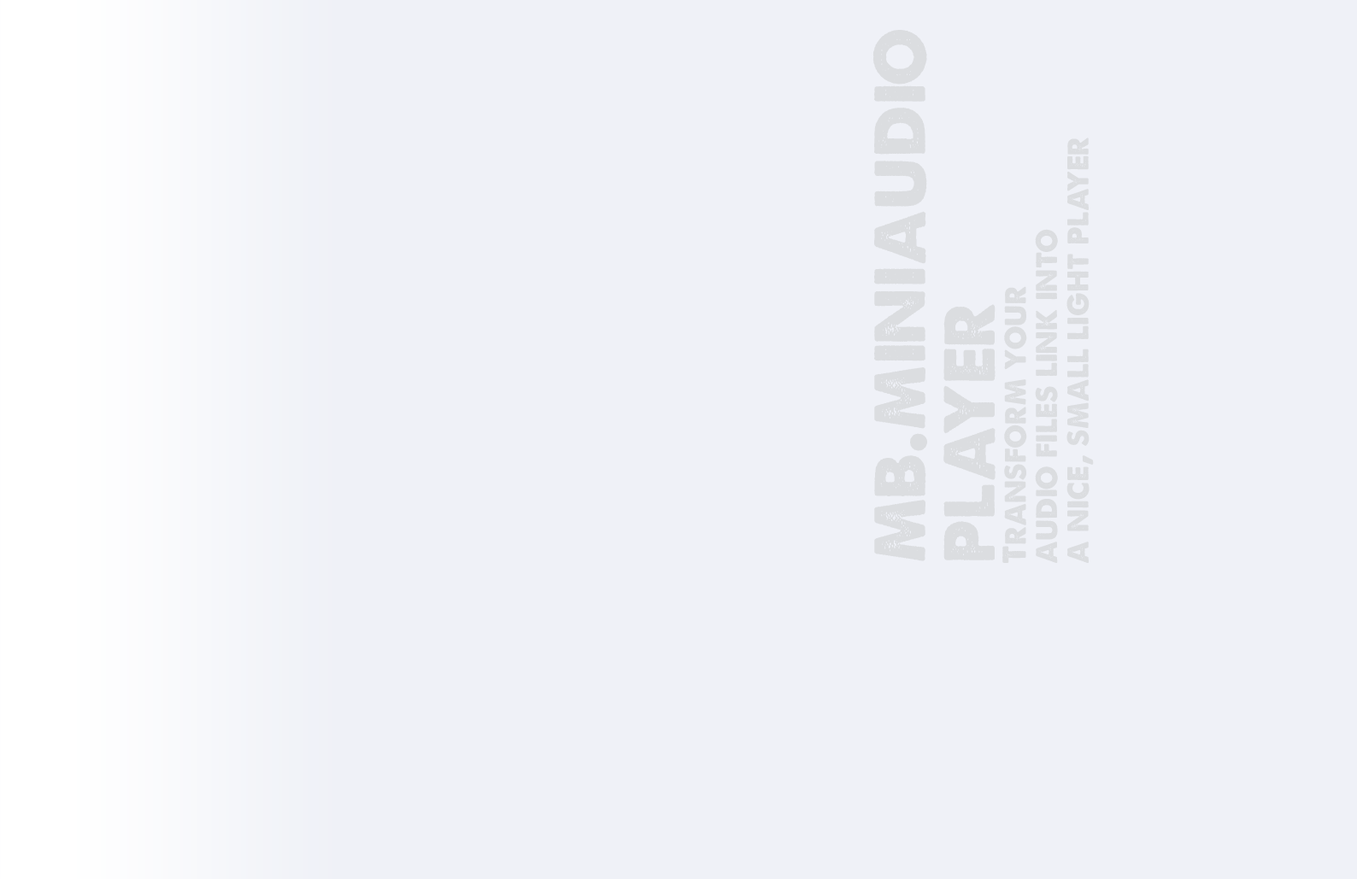
<style>
.page{position:relative;width:1357px;height:879px;background:#eff1f7}
.page>*{position:absolute;margin:0}
.t1{font:31.3px/31.3px "ALoveofThunder";color:#dbdde0}
.t2{font:75.8px/69.3px "ALoveofThunder";color:#dbdde0}
</style>
<div class="page">
<p class="t1" style="left:872px;top:30px;width:221px;height:533px;rotate:-90deg"><span class="t2">mb.miniaudio<br>player<br></span>Transform your <br>audio files link into <br>a nice, small light player</p>
</div>
